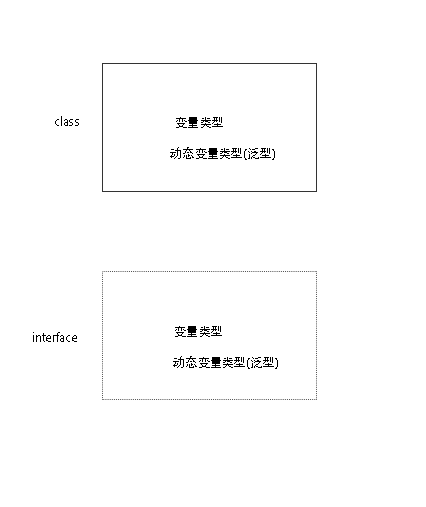
<style>
.page{position:relative;width:426px;height:507px;background:#ffffff}
.page>*{position:absolute;margin:0}
.t1{font:12px "AdobeHeitiStd-Regular";color:#000000}
</style>
<div class="page">
<p class="t1" style="left:55px;top:116px;width:24px;height:10px">class</p>
<p class="t1" style="left:176px;top:117px;width:47px;height:11px">变量类型</p>
<p class="t1" style="left:170px;top:147px;width:105px;height:13px">动态变量类型(泛型)</p>
<p class="t1" style="left:175px;top:326px;width:47px;height:11px">变量类型</p>
<p class="t1" style="left:33px;top:332px;width:44px;height:10px">interface</p>
<p class="t1" style="left:173px;top:356px;width:105px;height:13px">动态变量类型(泛型)</p>
</div>
